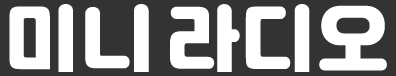
<style>
.page{position:relative;width:396px;height:76px;background:#333333}
.page>*{position:absolute;margin:0}
.t1{font:72px "Jalnan";letter-spacing:0.05em;color:#ffffff;text-transform:uppercase}
</style>
<div class="page">
<p class="t1" style="left:9px;top:4px;width:378px;height:68px">미니 라디오</p>
</div>
